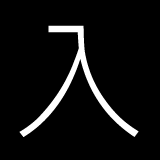
<style>
.page{position:relative;width:160px;height:160px;background:#000000}
.page>*{position:absolute;margin:0}
.t1{font:130px "FMotoyaCedar-W1-90msp-RKSJ-H";color:#ffffff}
</style>
<div class="page">
<p class="t1" style="left:19px;top:25px;width:120px;height:112px">入</p>
</div>
